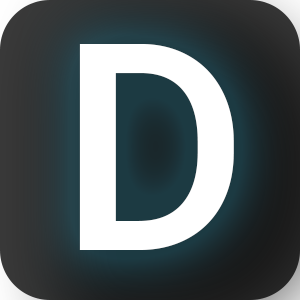
<style>
.page{position:relative;width:300px;height:300px}
.page>*{position:absolute;margin:0}
.t1{font:290px "Roboto-Medium";color:#ffffff}
</style>
<div class="page">
<p class="t1" style="left:79px;top:44px;width:155px;height:206px">D</p>
</div>
